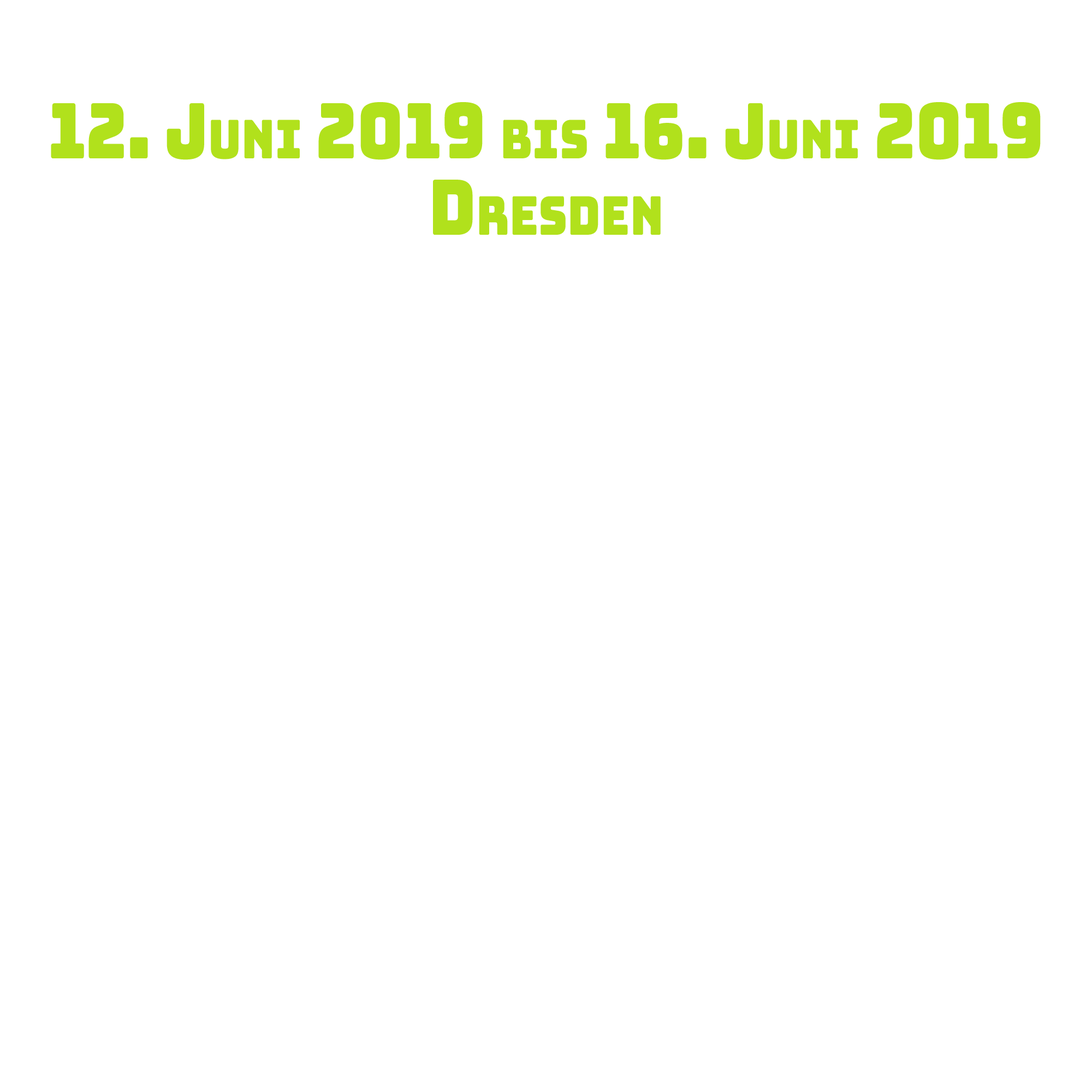
<style>
.page{position:relative;width:1092px;height:1092px;background:#ffffff}
.page>*{position:absolute;margin:0}
.t1{font:76.4px "Bungee-Regular";color:#b1e11c;font-variant:small-caps;scale:0.83 1}
</style>
<div class="page">
<p class="t1" style="left:51px;top:102px;width:990px;height:133px;text-align:center">12. Juni 2019 bis 16. Juni 2019<br>Dresden</p>
</div>
